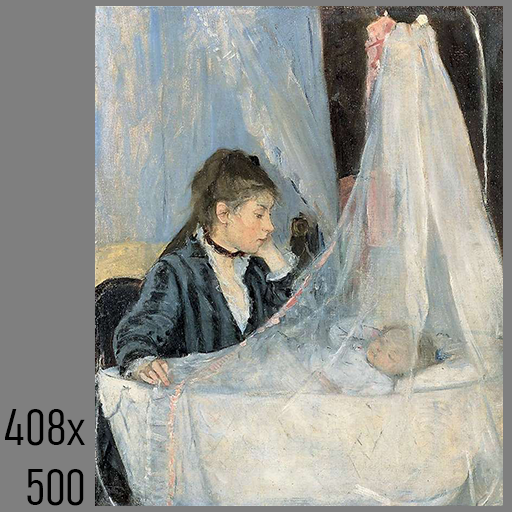
<style>
.page{position:relative;width:512px;height:512px;background:#7f7f7f}
.page>*{position:absolute;margin:0}
.t1{font:50px "Bahnschrift-LightCondensed";color:#000000}
</style>
<div class="page">
<p class="t1" style="left:5px;top:409px;width:80px;height:97px;text-align:right">408x<br>500</p>
</div>
